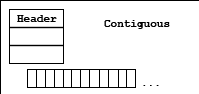
<style>
.page{position:relative;width:199px;height:94px;background:#ffffff}
.page>*{position:absolute;margin:0}
.t1{font:11px "CourierNewPS-BoldMT";color:#000000}
</style>
<div class="page">
<p class="t1" style="left:17px;top:15px;width:40px;height:7px">Header</p>
<p class="t1" style="left:104px;top:20px;width:66px;height:9px">Contiguous</p>
<p class="t1" style="left:143px;top:85px;width:16px;height:1px">...</p>
</div>
